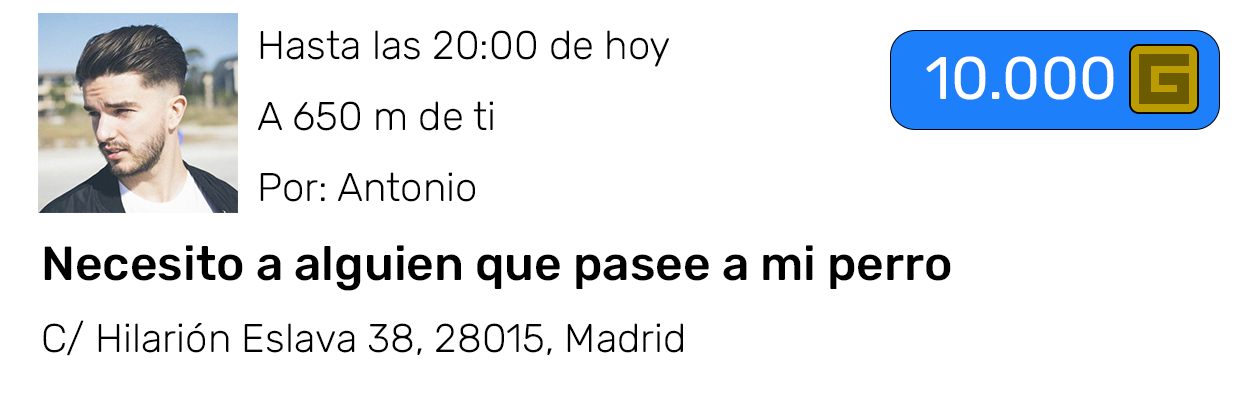
<style>
.page{position:relative;width:1250px;height:400px;background:#ffffff}
.page>*{position:absolute;margin:0}
.t1{font:40px "Rubik-Light";color:#000000}
.t2{font:10px "Roboto-Regular";color:#000000}
.t3{font:48px "Rubik-Medium";color:#000000}
.t4{font:60px "Rubik-Regular";color:#ffffff}
</style>
<div class="page">
<p class="t1" style="left:43px;top:30px;width:908px;height:326px"><span class="t2">      </span>Hasta las 20:00 de hoy<br><br><br>      A 650 m de ti<br><br><br>      Por: Antonio<br><br><br><span class="t3">Necesito a alguien que pasee a mi perro<br><br></span>C/ Hilarión Eslava 38, 28015, Madrid</p>
<p class="t4" style="left:926px;top:56px;width:188px;height:44px">10.000</p>
</div>
